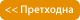
<style>
.page{position:relative;width:80px;height:20px;background:#e68d00}
.page>*{position:absolute;margin:0}
.t1{font:11px "MyriadPro-Semibold";color:#ffffff}
</style>
<div class="page">
<p class="t1" style="left:5px;top:5px;width:68px;height:11px">&lt;&lt; Претходна</p>
</div>
